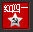
<style>
.page{position:relative;width:33px;height:32px;background:#c50000}
.page>*{position:absolute;margin:0}
.t1{font:10.4px "SimSun";letter-spacing:-0.25em;color:#ffffff}
</style>
<div class="page">
<p class="t1" style="left:4px;top:4px;width:24px;height:9px">红四一</p>
</div>
